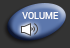
<style>
.page{position:relative;width:70px;height:48px;background:#333333}
.page>*{position:absolute;margin:0}
.t1{font:9px "Roboto-Regular";color:#ffffff}
</style>
<div class="page">
<p class="t1" style="left:22px;top:12px;width:37px;height:7px">VOLUME</p>
</div>
